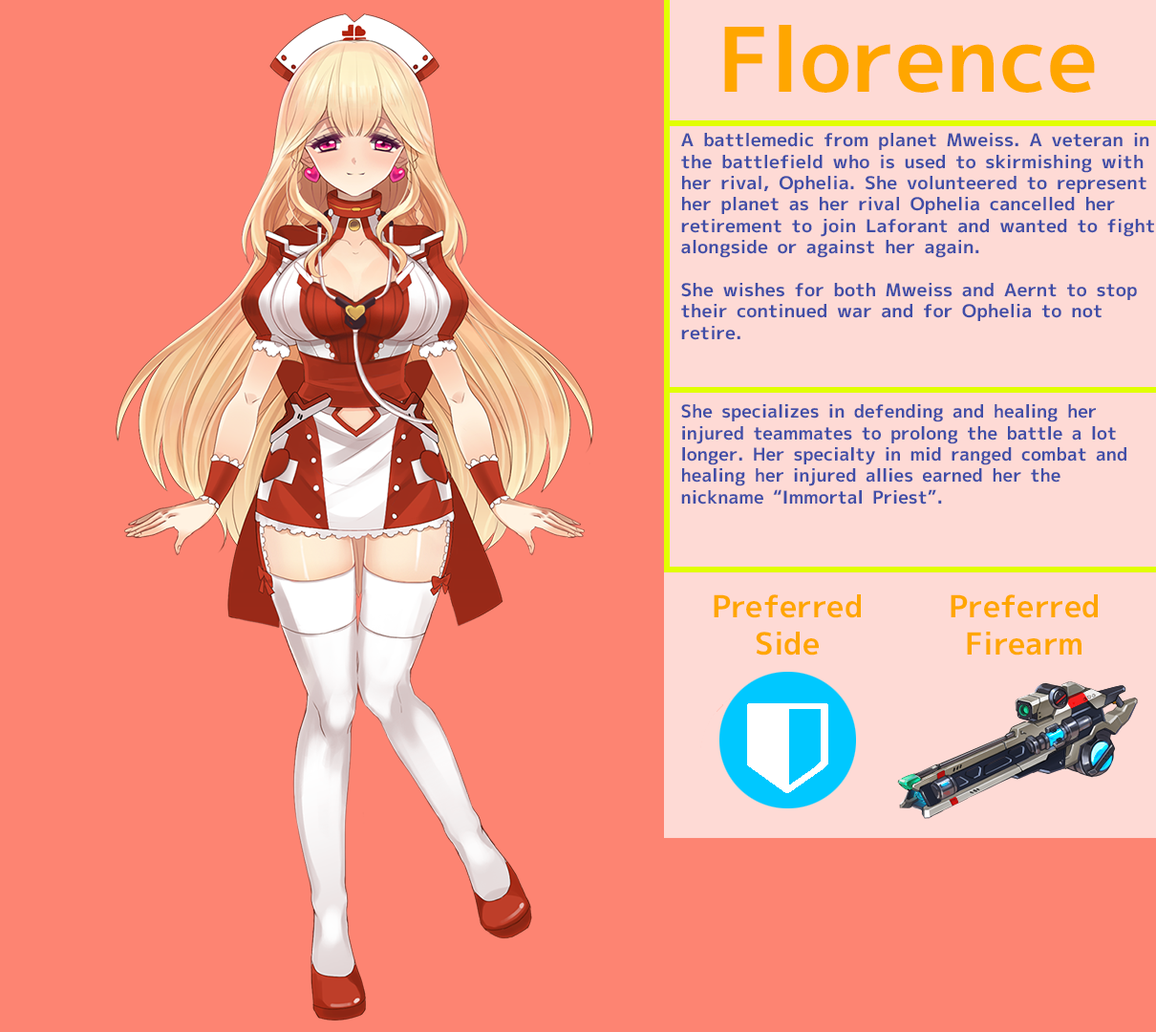
<style>
.page{position:relative;width:1156px;height:1032px;background:#fd8472}
.page>*{position:absolute;margin:0}
.t1{font:89.2px "MigMix-2P-Bold";color:#ffa600}
.t2{font:17.8px "MigMix-2P-Bold";color:#404ea7;scale:1.03 1}
.t3{font:17.8px "MigMix-2P-Bold";color:#404ea7}
.t4{font:30.6px "MigMix-2P-Bold";color:#ffa600}
</style>
<div class="page">
<p class="t1" style="left:724px;top:25px;width:371px;height:68px">Florence</p>
<p class="t2" style="left:681px;top:133px;width:473px;height:207px">A battlemedic from planet Mweiss. A veteran in the battlefield who is used to skirmishing with her rival, Ophelia. She volunteered to represent her planet as her rival Ophelia cancelled her retirement to join Laforant and wanted to fight alongside or against her again.<br><br>She wishes for both Mweiss and Aernt to stop their continued war and for Ophelia to not retire.</p>
<p class="t3" style="left:681px;top:404px;width:445px;height:100px">She specializes in defending and healing her injured teammates to prolong the battle a lot longer. Her specialty in mid ranged combat and healing her injured allies earned her the nickname “Immortal Priest”.</p>
<p class="t4" style="left:714px;top:594px;width:147px;height:61px;text-align:center">Preferred<br>Side</p>
<p class="t4" style="left:950px;top:594px;width:148px;height:61px;text-align:center">Preferred<br>Firearm</p>
</div>
